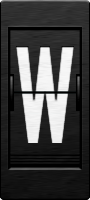
<style>
.page{position:relative;width:90px;height:200px}
.page>*{position:absolute;margin:0}
.t1{font:132px "LeagueGothic";letter-spacing:0.06em;color:#ffffff;scale:0.91 1}
</style>
<div class="page">
<p class="t1" style="left:16px;top:46px;width:58px;height:97px">W</p>
</div>
